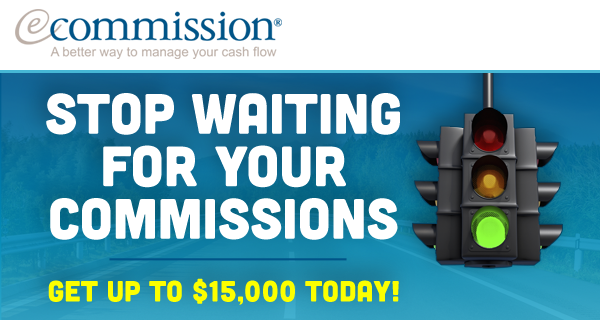
<style>
.page{position:relative;width:600px;height:320px;background:#ffffff}
.page>*{position:absolute;margin:0}
.t1{font:56.6px/52.5px "Cubano-Regular";color:#ffffff;text-transform:uppercase}
.t2{font:29.2px "Cubano-Regular";color:#fcff00;text-transform:uppercase}
</style>
<div class="page">
<p class="t1" style="left:46px;top:93px;width:354px;height:147px;text-align:center">Stop Waiting<br>for Your<br>Commissions</p>
<p class="t2" style="left:48px;top:278px;width:351px;height:27px">Get up to $15,000 today!</p>
</div>
